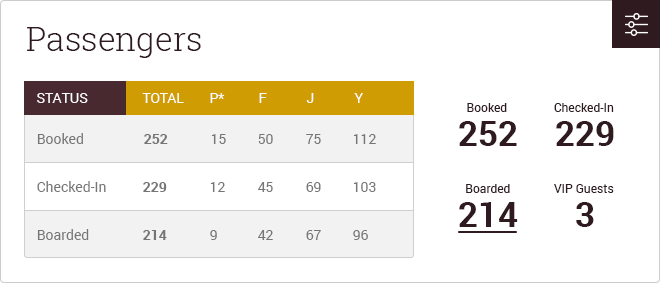
<style>
.page{position:relative;width:660px;height:283px;background:#ffffff}
.page>*{position:absolute;margin:0}
.t1{font:33px "RobotoSlab-Light";color:#2f1b1f}
.t2{font:14px "Roboto-Regular";color:#ffffff;text-transform:uppercase}
.t3{font:12px "Roboto-Regular";color:#2f1b1f}
.t4{font:35.1px "Roboto-Bold";color:#2f1b1f}
.t5{font:14px "Roboto-Regular";color:#767676}
.t6{font:14px "Roboto-Bold";color:#767676}
</style>
<div class="page">
<p class="t1" style="left:27px;top:27px;width:174px;height:31px">Passengers</p>
<p class="t2" style="left:37px;top:93px;width:51px;height:10px">Status</p>
<p class="t2" style="left:142px;top:93px;width:42px;height:10px">Total</p>
<p class="t2" style="left:210px;top:93px;width:15px;height:10px">P*</p>
<p class="t2" style="left:259px;top:93px;width:8px;height:10px">F</p>
<p class="t2" style="left:306px;top:93px;width:8px;height:10px">J</p>
<p class="t2" style="left:354px;top:93px;width:9px;height:10px">Y</p>
<p class="t3" style="left:467px;top:103px;width:40px;height:9px">Booked</p>
<p class="t3" style="left:554px;top:103px;width:60px;height:9px">Checked-In</p>
<p class="t4" style="left:459px;top:121px;width:58px;height:25px">252</p>
<p class="t4" style="left:556px;top:121px;width:58px;height:25px">229</p>
<p class="t5" style="left:37px;top:133px;width:46px;height:11px">Booked</p>
<p class="t6" style="left:144px;top:134px;width:24px;height:10px">252</p>
<p class="t5" style="left:211px;top:134px;width:15px;height:10px">15</p>
<p class="t5" style="left:258px;top:134px;width:15px;height:10px">50</p>
<p class="t5" style="left:306px;top:134px;width:15px;height:10px">75</p>
<p class="t5" style="left:353px;top:134px;width:23px;height:10px">112</p>
<p class="t5" style="left:37px;top:181px;width:69px;height:11px">Checked-In</p>
<p class="t6" style="left:143px;top:182px;width:24px;height:10px">229</p>
<p class="t5" style="left:210px;top:182px;width:15px;height:10px">12</p>
<p class="t5" style="left:258px;top:182px;width:15px;height:10px">45</p>
<p class="t5" style="left:306px;top:182px;width:15px;height:10px">69</p>
<p class="t5" style="left:353px;top:182px;width:23px;height:10px">103</p>
<p class="t3" style="left:466px;top:184px;width:44px;height:9px">Boarded</p>
<p class="t3" style="left:554px;top:184px;width:60px;height:9px">VIP Guests</p>
<p class="t4" style="left:459px;top:202px;width:59px;height:25px">214</p>
<p class="t4" style="left:576px;top:202px;width:18px;height:25px">3</p>
<p class="t5" style="left:37px;top:229px;width:52px;height:11px">Boarded</p>
<p class="t6" style="left:143px;top:230px;width:24px;height:10px">214</p>
<p class="t5" style="left:210px;top:230px;width:7px;height:10px">9</p>
<p class="t5" style="left:258px;top:230px;width:15px;height:10px">42</p>
<p class="t5" style="left:306px;top:230px;width:15px;height:10px">67</p>
<p class="t5" style="left:353px;top:230px;width:15px;height:10px">96</p>
</div>
